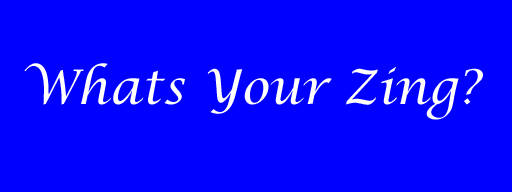
<style>
.page{position:relative;width:512px;height:192px;background:#0000ff}
.page>*{position:absolute;margin:0}
.t1{font:47.8px "LucidaCalligraphy-Italic";color:#ffffff}
</style>
<div class="page">
<p class="t1" style="left:24px;top:63px;width:459px;height:57px">Whats Your Zing?</p>
</div>
